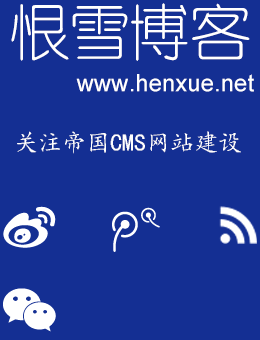
<style>
.page{position:relative;width:260px;height:340px;background:#142f93}
.page>*{position:absolute;margin:0}
.t1{font:60px "FZY1JW--GB1-0";color:#ffffff}
.t2{font:24px "ArialMT";color:#ffffff}
.t3{font:24px "¿¬Ìå";color:#ffffff}
</style>
<div class="page">
<p class="t1" style="left:11px;top:3px;width:239px;height:58px">恨雪博客</p>
<p class="t2" style="left:76px;top:74px;width:178px;height:18px">www.henxue.net</p>
<p class="t3" style="left:17px;top:131px;width:224px;height:23px">关注帝国CMS网站建设</p>
</div>
